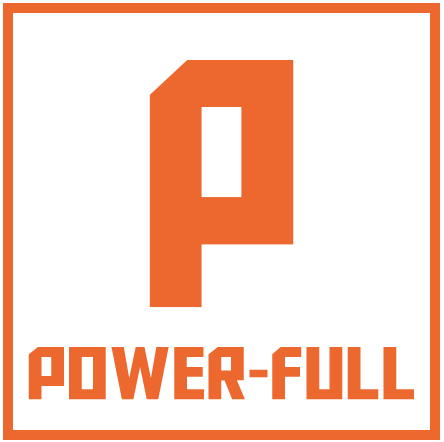
<style>
.page{position:relative;width:444px;height:442px;background:#ffffff}
.page>*{position:absolute;margin:0}
.t1{font:74px "AldotheApache";color:#ec682e;scale:1.16 1}
</style>
<div class="page">
<p class="t1" style="left:28px;top:347px;width:386px;height:53px">POWER-FULL</p>
</div>
